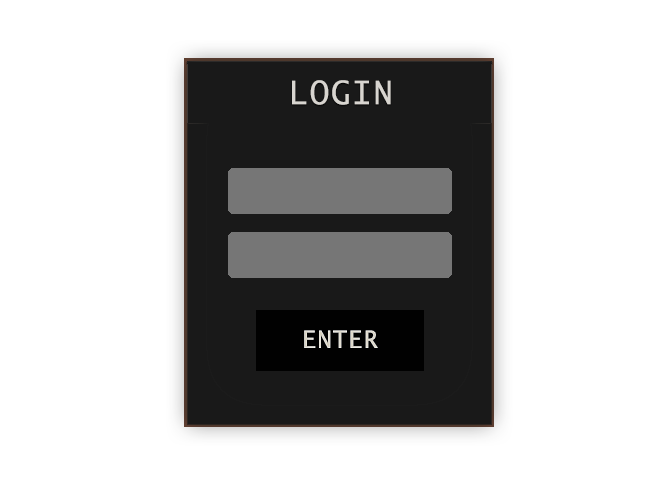
<style>
.page{position:relative;width:650px;height:500px;background:#ffffff}
.page>*{position:absolute;margin:0}
.t1{font:32px "LucidaSans-Typewriter";letter-spacing:0.06em;color:#d8d5d0;text-transform:uppercase}
.t2{font:24px "LucidaSans-Typewriter";letter-spacing:0.04em;color:#e3dfd4;text-transform:uppercase}
</style>
<div class="page">
<p class="t1" style="left:292px;top:80px;width:99px;height:25px">Login</p>
<p class="t2" style="left:304px;top:330px;width:74px;height:18px">enter</p>
</div>
